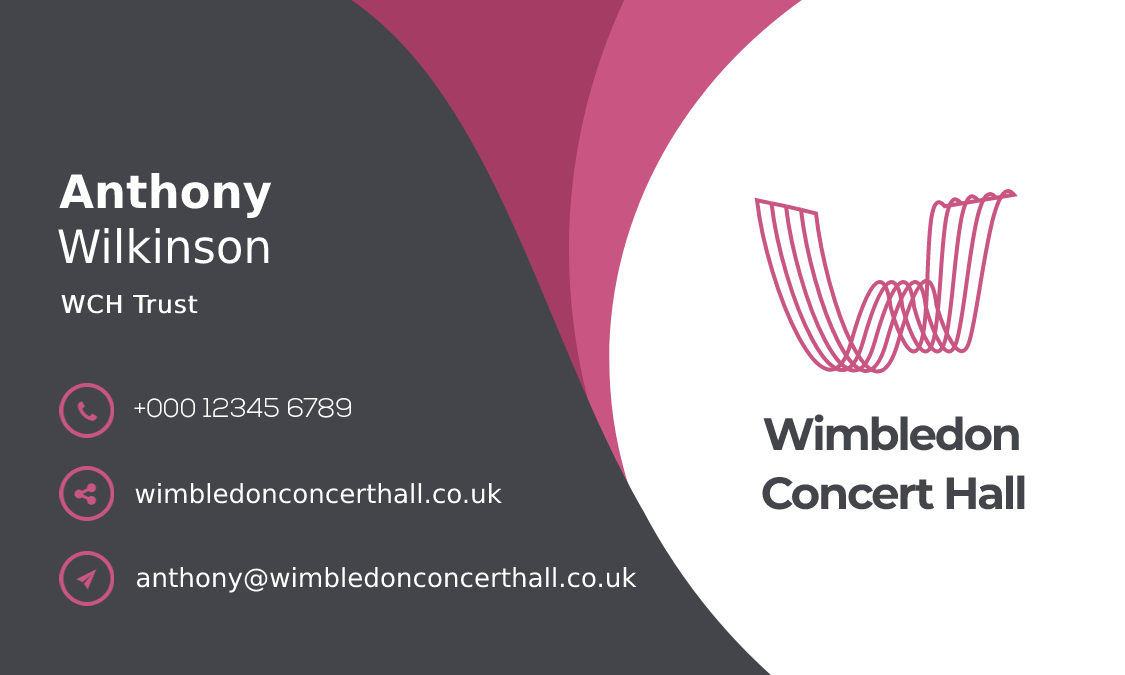
<style>
.page{position:relative;width:1125px;height:675px;background:#43454b}
.page>*{position:absolute;margin:0}
.t1{font:46.1px "NexaLight";color:#ffffff}
.t2{font:46.1px "NexaBold";color:#ffffff}
.t3{font:24.7px "NexaLight";letter-spacing:0.02em;color:#ffffff;font-weight:bold}
.t4{font:26.2px "NexaLight";color:#ffffff;text-transform:uppercase}
.t5{font:45.2px "Montserrat-Bold";letter-spacing:-0.05em;color:#43454b}
.t6{font:26.2px "NexaLight";color:#ffffff}
.t7{font:45.1px "Montserrat-Bold";letter-spacing:-0.05em;color:#43454b}
</style>
<div class="page">
<p class="t1" style="left:58px;top:172px;width:214px;height:92px;text-align:right"><span class="t2">Anthony<br></span>Wilkinson</p>
<p class="t3" style="left:61px;top:294px;width:137px;height:20px">WCH Trust</p>
<p class="t4" style="left:134px;top:398px;width:217px;height:20px">+000 12345 6789</p>
<p class="t5" style="left:763px;top:414px;width:256px;height:37px">Wimbledon</p>
<p class="t6" style="left:135px;top:483px;width:367px;height:21px">wimbledonconcerthall.co.uk</p>
<p class="t7" style="left:762px;top:475px;width:263px;height:35px">Concert Hall</p>
<p class="t6" style="left:136px;top:567px;width:501px;height:26px">anthony@wimbledonconcerthall.co.uk</p>
</div>
